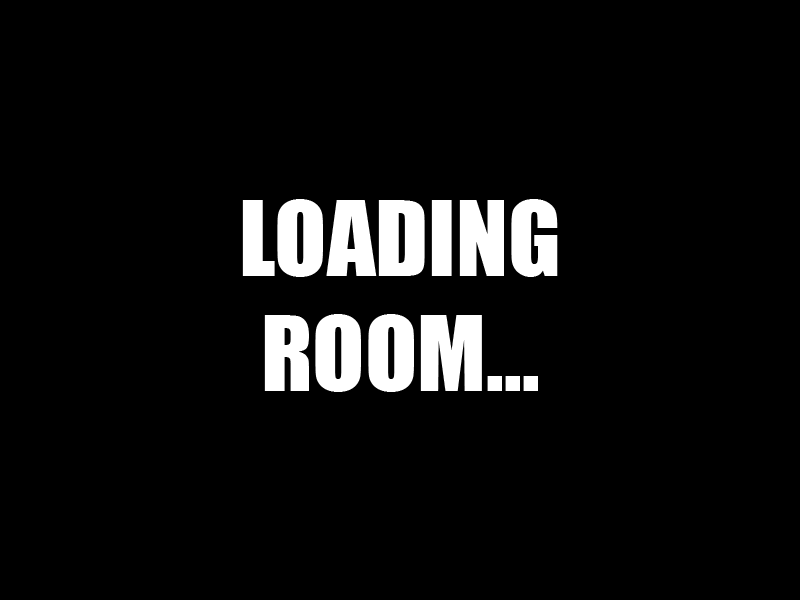
<style>
.page{position:relative;width:800px;height:600px;background:#000000}
.page>*{position:absolute;margin:0}
.t1{font:96px "Impact";color:#ffffff}
</style>
<div class="page">
<p class="t1" style="left:242px;top:199px;width:316px;height:193px;text-align:center">LOADING<br>ROOM...</p>
</div>
